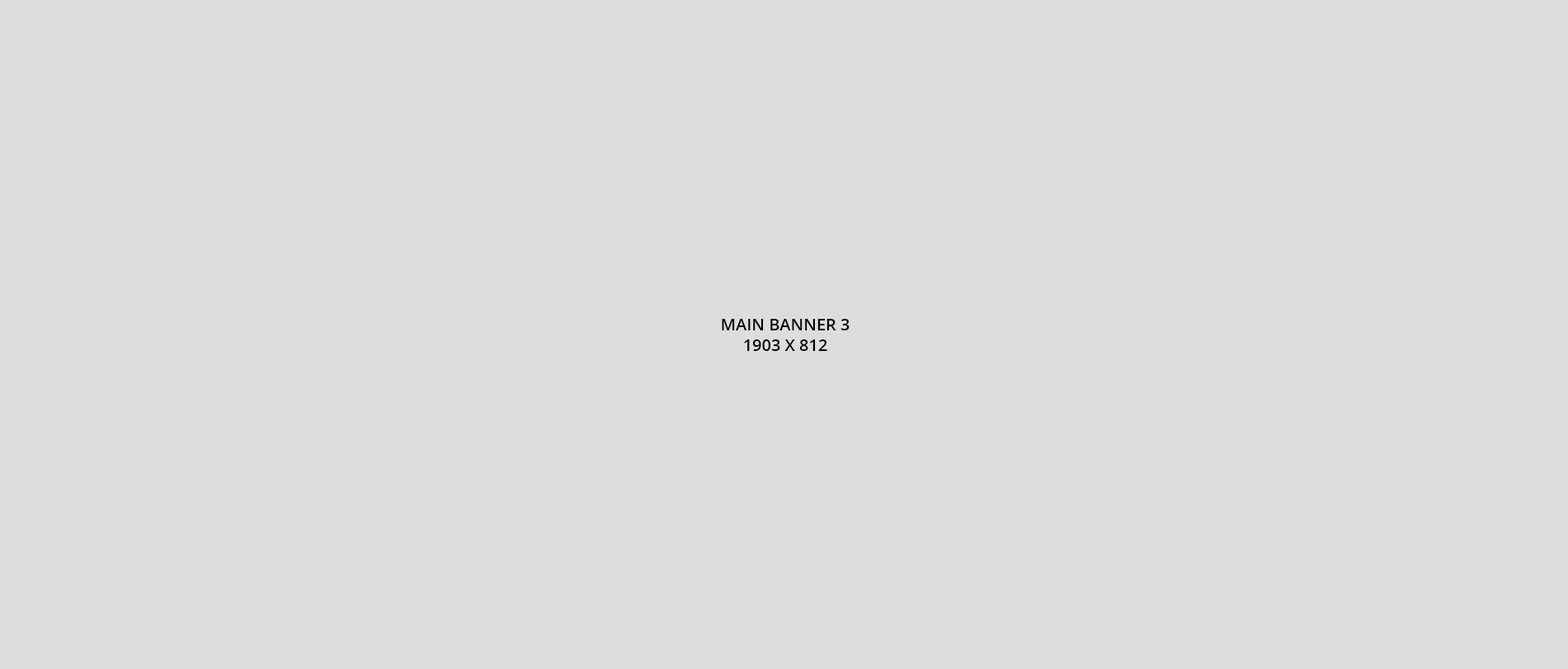
<style>
.page{position:relative;width:1568px;height:669px;background:#dddddd}
.page>*{position:absolute;margin:0}
.t1{font:16.5px/20.6px "OpenSans-Semibold";color:#000000;text-transform:uppercase}
</style>
<div class="page">
<p class="t1" style="left:722px;top:319px;width:128px;height:32px;text-align:center">main banner 3<br>1903 x 812</p>
</div>
